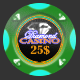
<style>
.page{position:relative;width:80px;height:80px;background:#333333}
.page>*{position:absolute;margin:0}
.t1{font:10.8px/3.6px "EdwardianScriptITC";color:#fda047}
.t2{font:6.3px/5.4px "Castellar";color:#fda047;scale:1.5 1}
.t3{font:10.6px "BernardMT-Condensed";color:#e19012;scale:1.22 1}
</style>
<div class="page">
<p class="t1" style="left:19px;top:30px;width:41px;height:14px;text-align:justify">Diamond<br><span class="t2">CASINO</span></p>
<p class="t3" style="left:30px;top:45px;width:20px;height:10px">25$</p>
</div>
